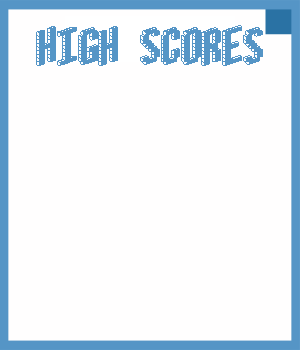
<style>
.page{position:relative;width:300px;height:350px;background:#fffefe}
.page>*{position:absolute;margin:0}
.t1{font:41.7px "Blox-(BRK";color:#5595c6}
</style>
<div class="page">
<p class="t1" style="left:36px;top:25px;width:227px;height:41px">high scores</p>
</div>
